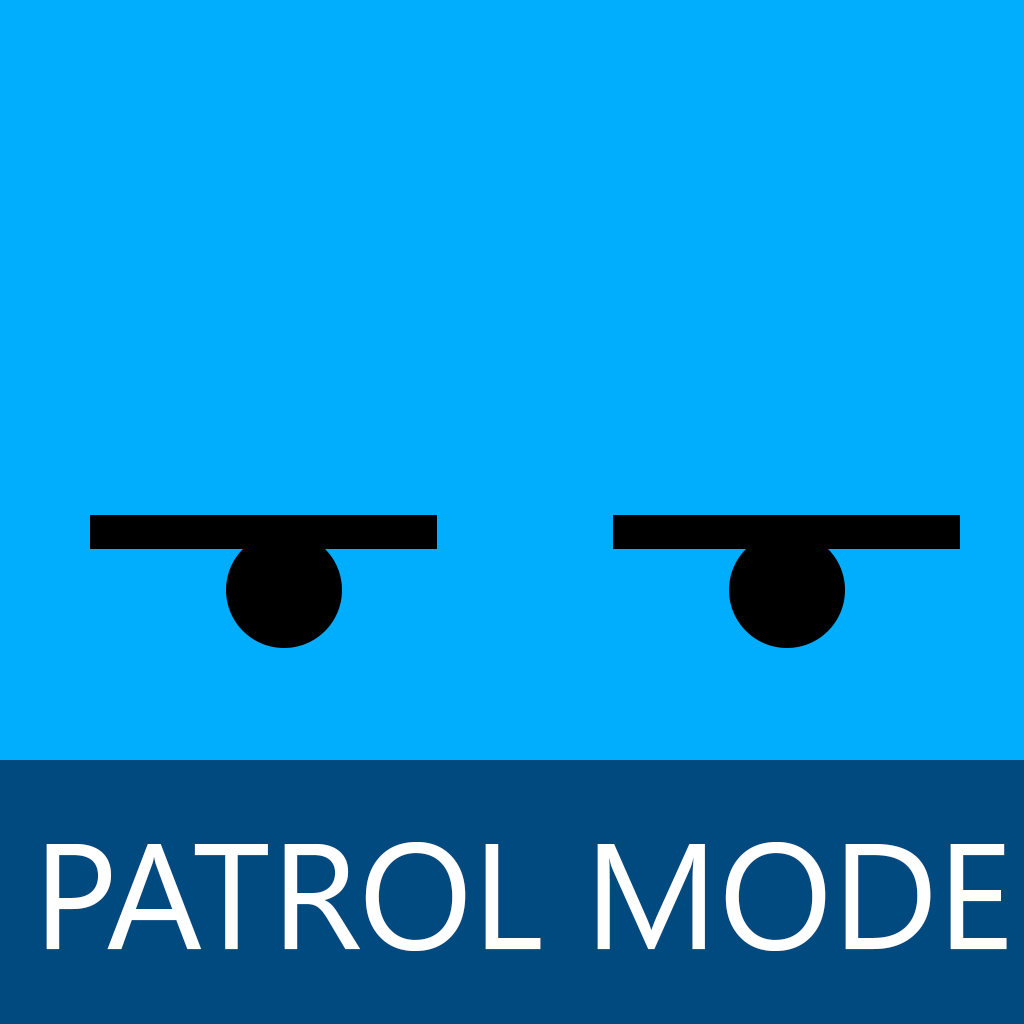
<style>
.page{position:relative;width:1024px;height:1024px;background:#01adfd}
.page>*{position:absolute;margin:0}
.t1{font:150px "SegoeUI";color:#ffffff}
</style>
<div class="page">
<p class="t1" style="left:46px;top:842px;width:961px;height:109px">PATROL MODE</p>
</div>
